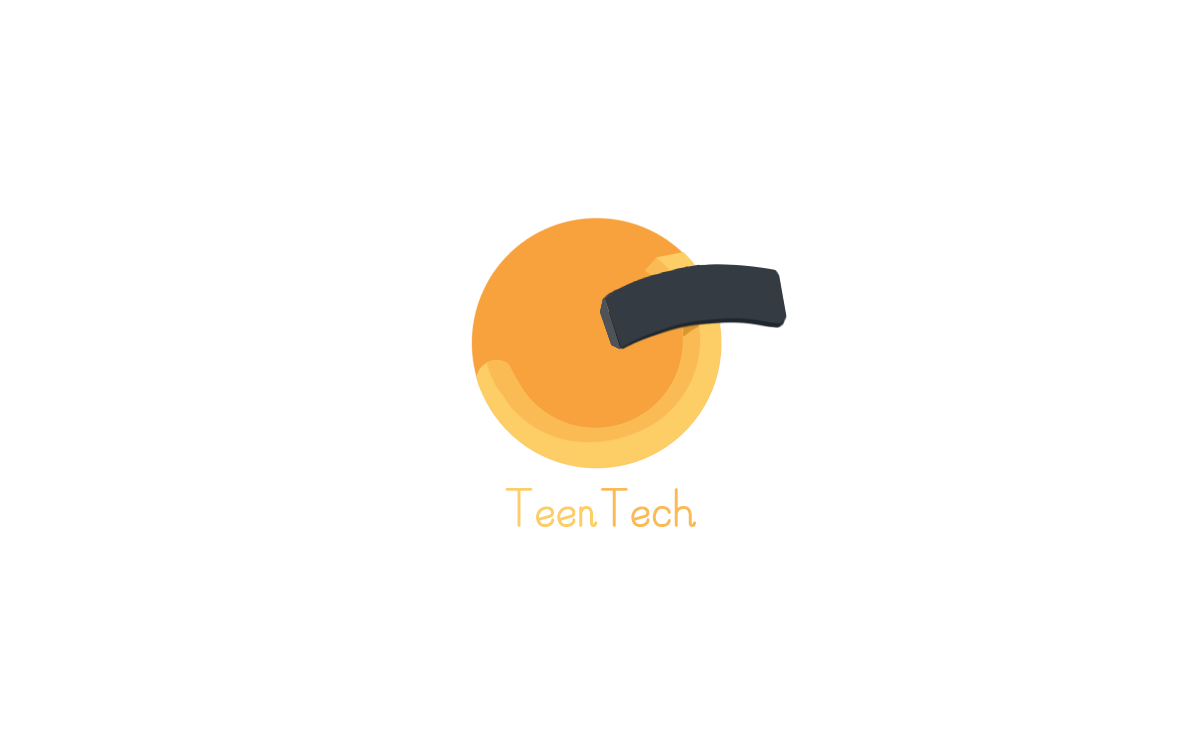
<style>
.page{position:relative;width:1200px;height:738px;background:#ffffff}
.page>*{position:absolute;margin:0}
.t1{font:48px "PreCursive_Regular";letter-spacing:0.05em;color:#fece66}
.t2{font:48px "PreCursive_Regular";letter-spacing:0.05em;color:#faba54}
</style>
<div class="page">
<p class="t1" style="left:505px;top:487px;width:191px;height:40px">Teen<span class="t2">Tech</span></p>
</div>
